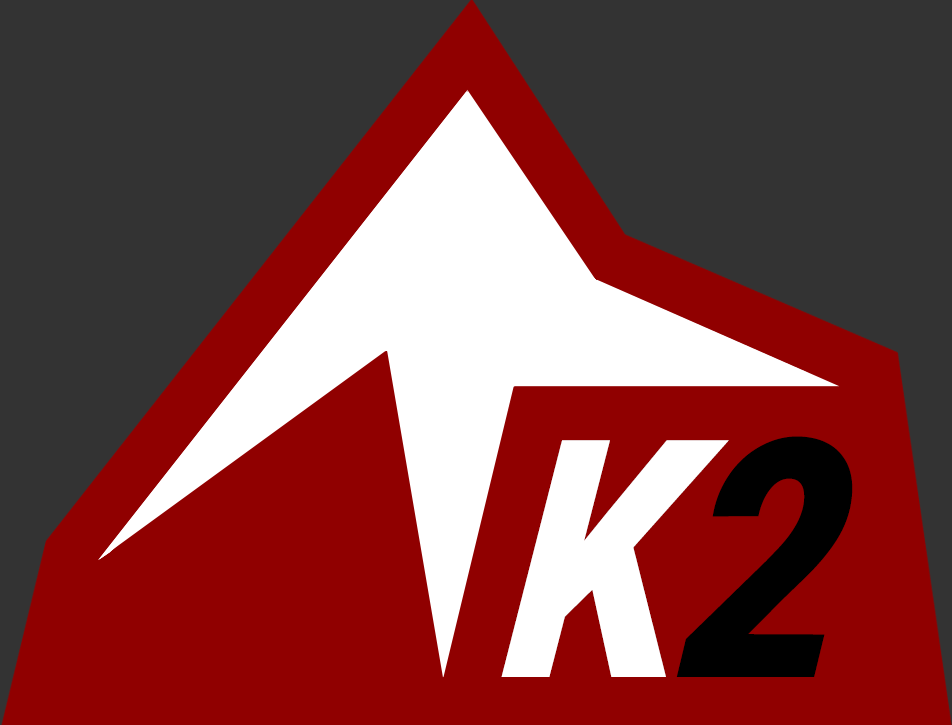
<style>
.page{position:relative;width:952px;height:725px;background:#900000}
.page>*{position:absolute;margin:0}
.t1{font:334.8px "Roboto-BlackItalic";letter-spacing:-0.04em;color:#ffffff;text-transform:uppercase;scale:0.85 1}
.t2{font:334.8px "Roboto-BlackItalic";letter-spacing:-0.04em;color:#000000;text-transform:uppercase;scale:0.85 1}
</style>
<div class="page">
<p class="t1" style="left:501px;top:436px;width:352px;height:241px">K<span class="t2">2</span></p>
</div>
